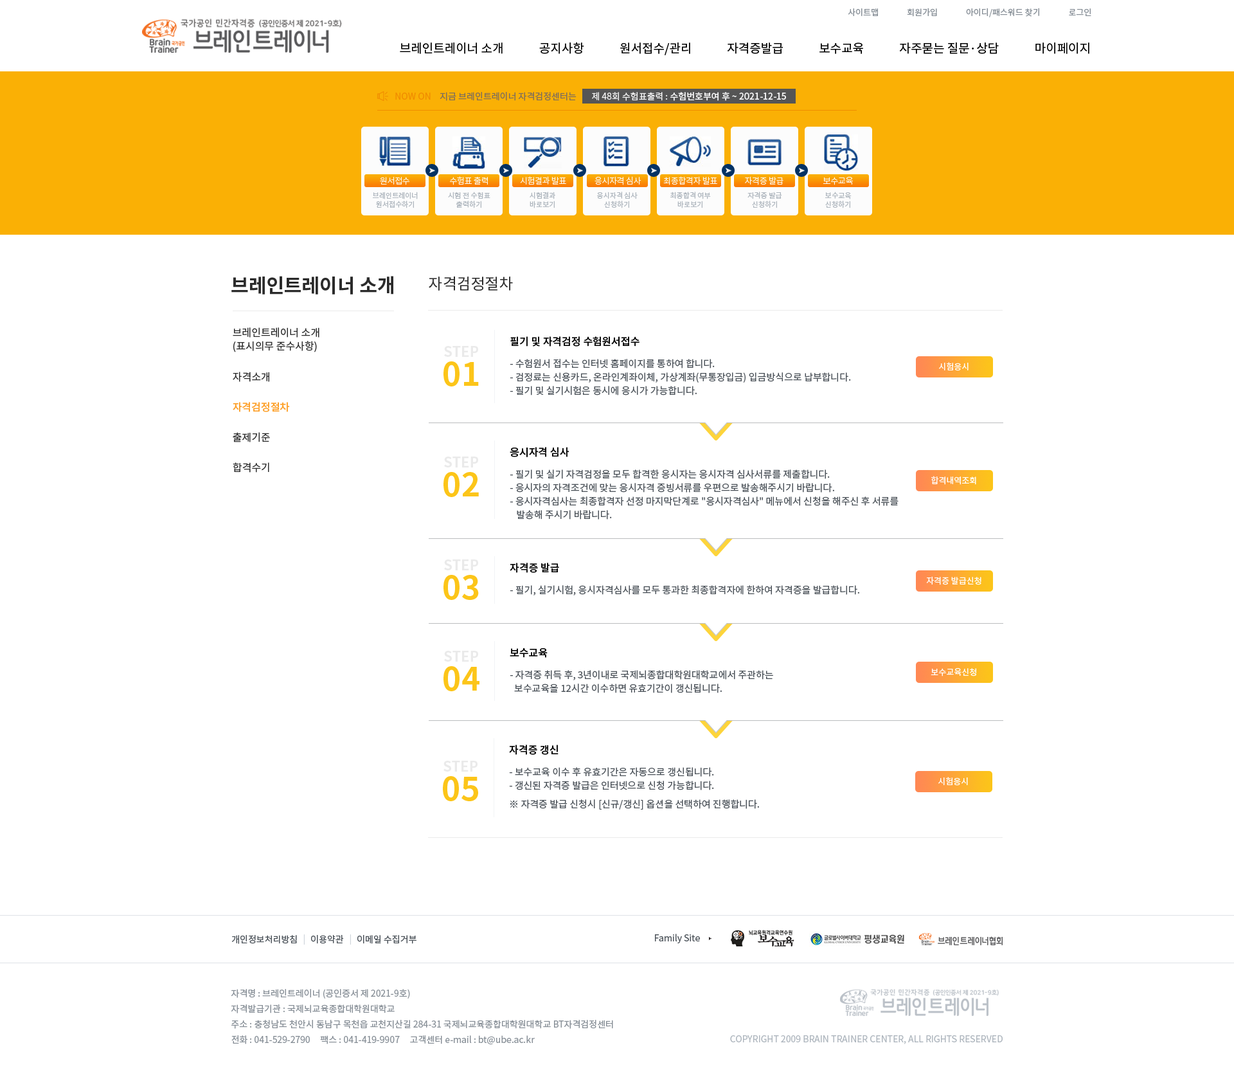
<style>
.page{position:relative;width:1234px;height:1070px;background:#ffffff}
.page>*{position:absolute;margin:0}
.t1{font:8.4px "NotoSansCJKkr-Regular";letter-spacing:0.001em;color:#868e96}
.t2{font:12.2px "NotoSansCJKkr-Regular";color:#000000}
.t3{font:9px "NotoSansCJKkr-Regular";color:#f08c00}
.t4{font:9px "NotoSansCJKkr-Regular";color:#7c6d5d}
.t5{font:9px "NotoSansCJKkr-Medium";color:#f8f8f8}
.t6{font:9px "NotoSansCJKkr-Regular";color:#f8f8f8}
.t7{font:8.4px "NotoSansCJKkr-Light";letter-spacing:-0.025em;color:#fcfcfc}
.t8{font:7.1px/9px "NotoSansCJKkr-Regular";color:#adb5bd}
.t9{font:19.3px "NotoSansCJKkr-Bold";color:#2b2b2b}
.t10{font:15.4px "NotoSansCJKkr-Regular";color:#2b2b2b}
.t11{font:10.3px/13.5px "NotoSansCJKkr-Regular";color:#2b2b2b}
.t12{font:10.3px "NotoSansCJKkr-Medium";color:#000000}
.t13{font:14.1px "NotoSansCJKkr-Bold";color:#eaeaea}
.t14{font:32.1px "NotoSansCJKkr-Bold";color:#fcc519}
.t15{font:9.6px/13.5px "NotoSansCJKkr-Regular";color:#495057}
.t16{font:8.4px "NotoSansCJKkr-Regular";color:#ffffff}
.t17{font:10.3px "NotoSansCJKkr-Regular";color:#2b2b2b}
.t18{font:10.3px "NotoSansCJKkr-Medium";color:#fd9f27}
.t19{font:9.6px "NotoSansCJKkr-Regular";color:#495057}
.t20{font:9px "NotoSansCJKkr-Regular";color:#495057}
.t21{font:9px "NotoSansCJKkr-Regular";color:#ced4da}
.t22{font:9px/15.4px "NotoSansCJKkr-Regular";color:#868e96}
.t23{font:9px "NotoSansCJKkr-Regular";color:#adb5bd}
</style>
<div class="page">
<p class="t1" style="left:848px;top:8px;width:244px;height:9px">사이트맵               회원가입               아이디/패스워드 찾기               로그인</p>
<p class="t2" style="left:400px;top:42px;width:690px;height:13px">브레인트레이너 소개             공지사항             원서접수/관리             자격증발급             보수교육             자주묻는 질문·상담             마이페이지</p>
<p class="t3" style="left:395px;top:93px;width:36px;height:7px">NOW ON</p>
<p class="t4" style="left:440px;top:92px;width:137px;height:9px">지금 브레인트레이너 자격검정센터는</p>
<p class="t5" style="left:592px;top:92px;width:194px;height:9px"><span class="t6">제 48회 수험표출력 : </span>수험번호부여 후 ~ 2021-12-15</p>
<p class="t7" style="left:380px;top:177px;width:30px;height:8px">원서접수</p>
<p class="t7" style="left:450px;top:176px;width:38px;height:9px">수험표 출력</p>
<p class="t7" style="left:520px;top:176px;width:46px;height:8px">시험결과 발표</p>
<p class="t7" style="left:595px;top:176px;width:47px;height:9px">응시자격 심사</p>
<p class="t7" style="left:663px;top:176px;width:54px;height:9px">최종합격자 발표</p>
<p class="t7" style="left:745px;top:176px;width:39px;height:9px">자격증 발급</p>
<p class="t7" style="left:823px;top:177px;width:30px;height:8px">보수교육</p>
<p class="t8" style="left:373px;top:192px;width:45px;height:16px;text-align:center">브레인트레이너<br>원서접수하기</p>
<p class="t8" style="left:448px;top:192px;width:43px;height:16px;text-align:center">시험 전 수험표<br>출력하기</p>
<p class="t8" style="left:530px;top:192px;width:25px;height:16px;text-align:center">시험결과<br>바로보기</p>
<p class="t8" style="left:597px;top:192px;width:41px;height:16px;text-align:center">응시자격 심사<br>신청하기</p>
<p class="t8" style="left:670px;top:192px;width:41px;height:16px;text-align:center">최종합격 여부<br>바로보기</p>
<p class="t8" style="left:748px;top:192px;width:34px;height:16px;text-align:center">자격증 발급<br>신청하기</p>
<p class="t8" style="left:825px;top:192px;width:27px;height:16px;text-align:center">보수교육<br>신청하기</p>
<p class="t9" style="left:231px;top:276px;width:162px;height:18px">브레인트레이너 소개</p>
<p class="t10" style="left:429px;top:276px;width:84px;height:15px">자격검정절차</p>
<p class="t11" style="left:233px;top:327px;width:87px;height:25px">브레인트레이너 소개<br>(표시의무 준수사항)</p>
<p class="t12" style="left:510px;top:336px;width:130px;height:10px">필기 및 자격검정 수험원서접수</p>
<p class="t13" style="left:444px;top:346px;width:34px;height:11px">STEP</p>
<p class="t14" style="left:444px;top:361px;width:35px;height:25px">01</p>
<p class="t15" style="left:510px;top:359px;width:341px;height:36px">- 수험원서 접수는 인터넷 홈페이지를 통하여 합니다.<br>- 검정료는 신용카드, 온라인계좌이체, 가상계좌(무통장입금) 입금방식으로 납부합니다.<br>- 필기 및 실기시험은 동시에 응시가 가능합니다.</p>
<p class="t16" style="left:939px;top:362px;width:30px;height:9px">시험응시</p>
<p class="t17" style="left:233px;top:372px;width:36px;height:10px">자격소개</p>
<p class="t18" style="left:233px;top:402px;width:57px;height:10px">자격검정절차</p>
<p class="t17" style="left:233px;top:432px;width:37px;height:10px">출제기준</p>
<p class="t12" style="left:510px;top:447px;width:60px;height:10px">응시자격 심사</p>
<p class="t13" style="left:444px;top:456px;width:34px;height:11px">STEP</p>
<p class="t17" style="left:233px;top:462px;width:36px;height:11px">합격수기</p>
<p class="t14" style="left:444px;top:472px;width:35px;height:25px">02</p>
<p class="t15" style="left:510px;top:469px;width:389px;height:50px">- 필기 및 실기 자격검정을 모두 합격한 응시자는 응시자격 심사서류를 제출합니다.<br>- 응시자의 자격조건에 맞는 응시자격 증빙서류를 우편으로 발송해주시기 바랍니다.<br>- 응시자격심사는 최종합격자 선정 마지막단계로 "응시자격심사" 메뉴에서 신청을 해주신 후 서류를<br>   발송해 주시기 바랍니다.</p>
<p class="t16" style="left:932px;top:476px;width:45px;height:9px">합격내역조회</p>
<p class="t13" style="left:444px;top:559px;width:34px;height:11px">STEP</p>
<p class="t12" style="left:510px;top:562px;width:49px;height:11px">자격증 발급</p>
<p class="t14" style="left:444px;top:575px;width:35px;height:25px">03</p>
<p class="t16" style="left:926px;top:576px;width:56px;height:9px">자격증 발급신청</p>
<p class="t19" style="left:510px;top:585px;width:350px;height:10px">- 필기, 실기시험, 응시자격심사를 모두 통과한 최종합격자에 한하여 자격증을 발급합니다.</p>
<p class="t13" style="left:444px;top:651px;width:34px;height:11px">STEP</p>
<p class="t12" style="left:510px;top:647px;width:38px;height:11px">보수교육</p>
<p class="t14" style="left:444px;top:666px;width:36px;height:25px">04</p>
<p class="t15" style="left:510px;top:670px;width:263px;height:23px">- 자격증 취득 후, 3년이내로 국제뇌종합대학원대학교에서 주관하는<br>  보수교육을 12시간 이수하면 유효기간이 갱신됩니다.</p>
<p class="t16" style="left:931px;top:668px;width:46px;height:8px">보수교육신청</p>
<p class="t12" style="left:509px;top:744px;width:50px;height:11px">자격증 갱신</p>
<p class="t13" style="left:444px;top:760px;width:34px;height:11px">STEP</p>
<p class="t15" style="left:509px;top:767px;width:205px;height:23px">- 보수교육 이수 후 유효기간은 자동으로 갱신됩니다.<br>- 갱신된 자격증 발급은 인터넷으로 신청 가능합니다.</p>
<p class="t14" style="left:443px;top:776px;width:35px;height:25px">05</p>
<p class="t16" style="left:939px;top:777px;width:29px;height:9px">시험응시</p>
<p class="t19" style="left:510px;top:799px;width:249px;height:10px">※ 자격증 발급 신청시 [신규/갱신] 옵션을 선택하여 진행합니다.</p>
<p class="t20" style="left:231px;top:935px;width:66px;height:9px">개인정보처리방침</p>
<p class="t21" style="left:303px;top:934px;width:2px;height:10px">|</p>
<p class="t20" style="left:311px;top:935px;width:33px;height:9px">이용약관</p>
<p class="t21" style="left:350px;top:934px;width:1px;height:10px">|</p>
<p class="t20" style="left:357px;top:935px;width:60px;height:9px">이메일 수집거부</p>
<p class="t20" style="left:655px;top:933px;width:45px;height:10px">Family Site</p>
<p class="t22" style="left:231px;top:989px;width:382px;height:56px">자격명 : 브레인트레이너 (공인증서 제 2021-9호)<br>자격발급기관 : 국제뇌교육종합대학원대학교<br>주소 : 충청남도 천안시 동남구 목천읍 교천지산길 284-31 국제뇌교육종합대학원대학교 BT자격검정센터<br>전화 : 041-529-2790     팩스 : 041-419-9907     고객센터 e-mail : bt@ube.ac.kr</p>
<p class="t23" style="left:730px;top:1035px;width:273px;height:9px">COPYRIGHT 2009 BRAIN TRAINER CENTER, ALL RIGHTS RESERVED</p>
</div>
